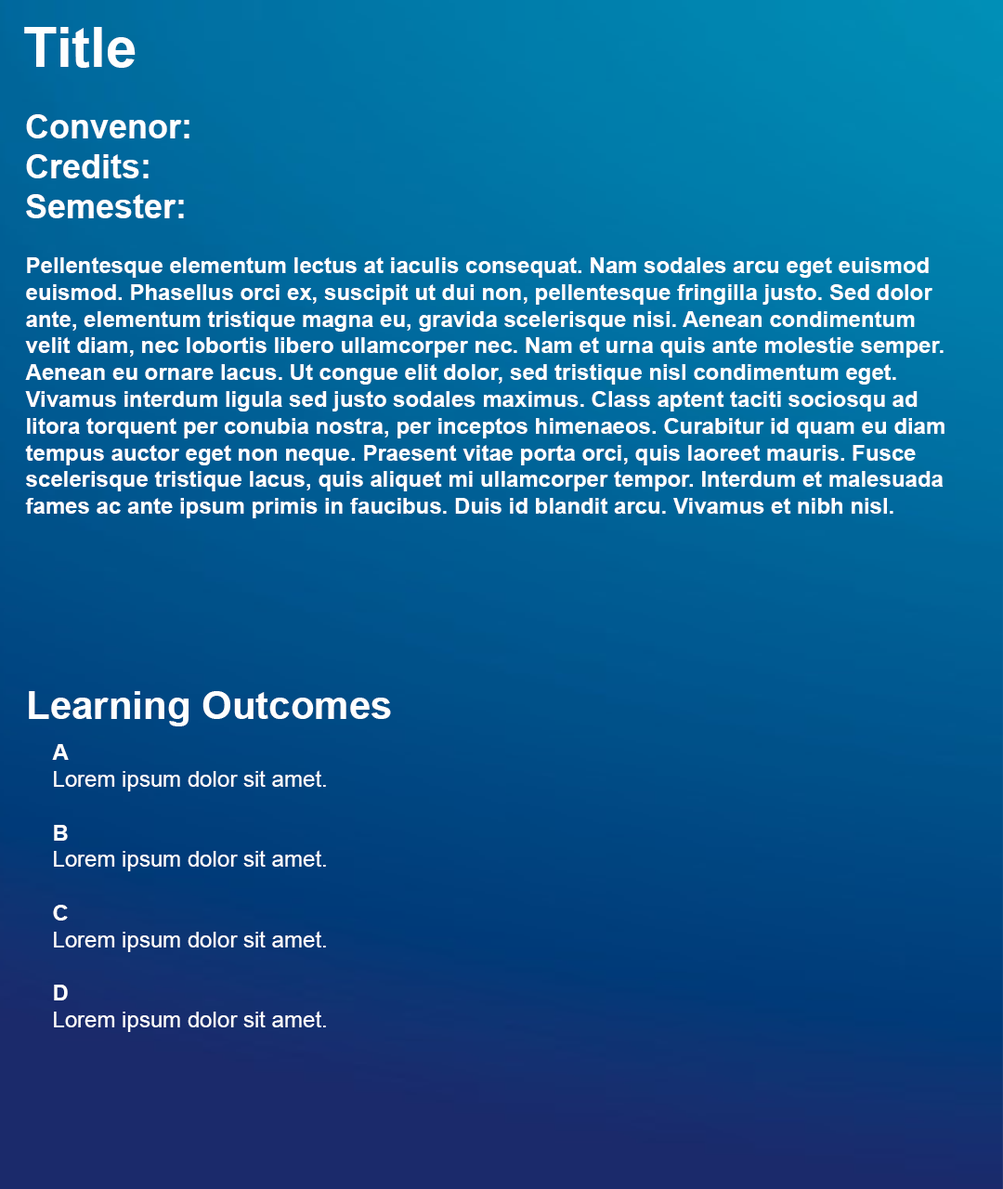
<style>
.page{position:relative;width:1003px;height:1189px}
.page>*{position:absolute;margin:0}
.t1{font:55.7px "Arial-BoldMT";color:#fefefe}
.t2{font:33.4px "Arial-BoldMT";color:#ffffff}
.t3{font:22.3px "Arial-BoldMT";color:#ffffff}
.t4{font:39px "Arial-BoldMT";color:#fefefe}
.t5{font:22.3px "ArialMT";color:#fefefe}
.t6{font:22.3px "Arial-BoldMT";color:#fefefe}
</style>
<div class="page">
<p class="t1" style="left:24px;top:27px;width:112px;height:41px">Title</p>
<p class="t2" style="left:26px;top:114px;width:163px;height:104px">Convenor: <br>Credits: <br>Semester:</p>
<p class="t3" style="left:25px;top:257px;width:920px;height:261px">Pellentesque elementum lectus at iaculis consequat. Nam sodales arcu eget euismod <br>euismod. Phasellus orci ex, suscipit ut dui non, pellentesque fringilla justo. Sed dolor <br>ante, elementum tristique magna eu, gravida scelerisque nisi. Aenean condimentum <br>velit diam, nec lobortis libero ullamcorper nec. Nam et urna quis ante molestie semper. <br>Aenean eu ornare lacus. Ut congue elit dolor, sed tristique nisl condimentum eget. <br>Vivamus interdum ligula sed justo sodales maximus. Class aptent taciti sociosqu ad <br>litora torquent per conubia nostra, per inceptos himenaeos. Curabitur id quam eu diam <br>tempus auctor eget non neque. Praesent vitae porta orci, quis laoreet mauris. Fusce <br>scelerisque tristique lacus, quis aliquet mi ullamcorper tempor. Interdum et malesuada <br>fames ac ante ipsum primis in faucibus. Duis id blandit arcu. Vivamus et nibh nisl.</p>
<p class="t4" style="left:29px;top:691px;width:362px;height:35px">Learning Outcomes</p>
<p class="t5" style="left:52px;top:744px;width:274px;height:288px"><span class="t6">A <br></span>Lorem ipsum dolor sit amet.<br><span class="t6"><br>B<br></span>Lorem ipsum dolor sit amet.<br><span class="t6"><br>C<br></span>Lorem ipsum dolor sit amet.<br><span class="t6"><br>D<br></span>Lorem ipsum dolor sit amet.</p>
</div>
